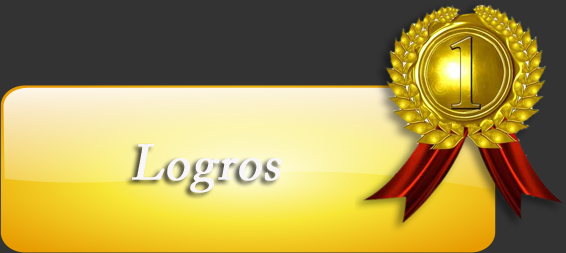
<style>
.page{position:relative;width:566px;height:253px;background:#333333}
.page>*{position:absolute;margin:0}
.t1{font:48px "ACaslonPro-Regular";letter-spacing:0.02em;color:#f9f6f9;font-weight:bold;font-style:italic}
</style>
<div class="page">
<p class="t1" style="left:132px;top:144px;width:150px;height:49px">Logros</p>
</div>
